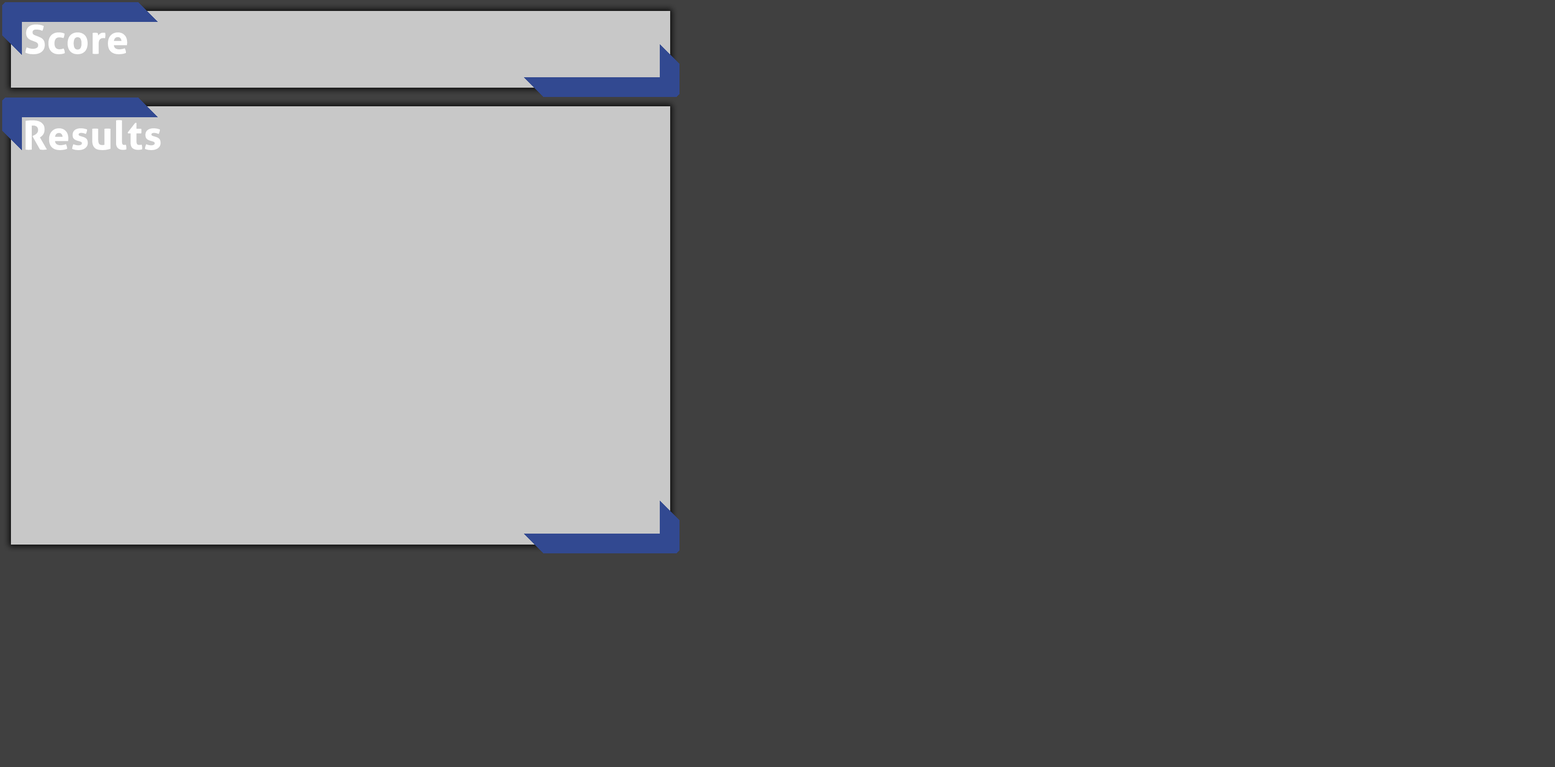
<style>
.page{position:relative;width:1555px;height:767px;background:#404040}
.page>*{position:absolute;margin:0}
.t1{font:39.4px "AllerLoose-Bold";color:#ffffff;font-weight:bold}
</style>
<div class="page">
<p class="t1" style="left:25px;top:24px;width:103px;height:30px">Score</p>
<p class="t1" style="left:25px;top:120px;width:136px;height:30px">Results</p>
</div>
